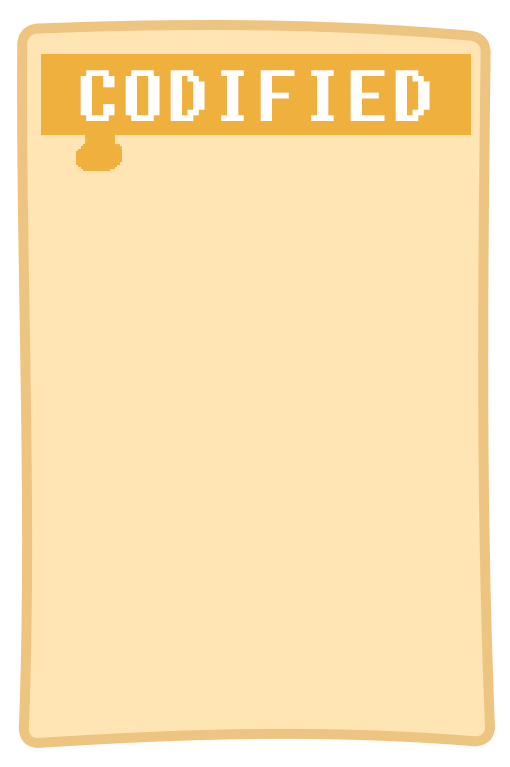
<style>
.page{position:relative;width:510px;height:767px;background:#ffe4b4}
.page>*{position:absolute;margin:0}
.t1{font:72px "Fixedsys";color:#ffffff}
</style>
<div class="page">
<p class="t1" style="left:80px;top:70px;width:350px;height:51px">CODIFIED</p>
</div>
